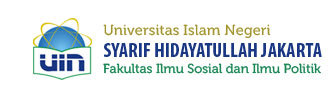
<style>
.page{position:relative;width:335px;height:99px;background:#ffffff}
.page>*{position:absolute;margin:0}
.t1{font:14.6px "Museo-500";letter-spacing:0.005em;color:#a29530}
.t2{font:20.2px "MyriadPro-BoldCond";letter-spacing:0.005em;color:#193783;text-transform:uppercase}
.t3{font:13px "Museo-500";color:#1b8755}
</style>
<div class="page">
<p class="t1" style="left:103px;top:24px;width:168px;height:15px">Universitas Islam Negeri</p>
<p class="t2" style="left:104px;top:43px;width:218px;height:14px">Syarif Hidayatullah Jakarta</p>
<p class="t3" style="left:103px;top:63px;width:218px;height:11px">Fakultas Ilmu Sosial dan Ilmu Politik</p>
</div>
